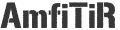
<style>
.page{position:relative;width:120px;height:30px;background:#ffffff}
.page>*{position:absolute;margin:0}
.t1{font:36px "UrbanSketch";color:#373737}
</style>
<div class="page">
<p class="t1" style="left:0px;top:2px;width:116px;height:27px">AmfiTiR</p>
</div>
